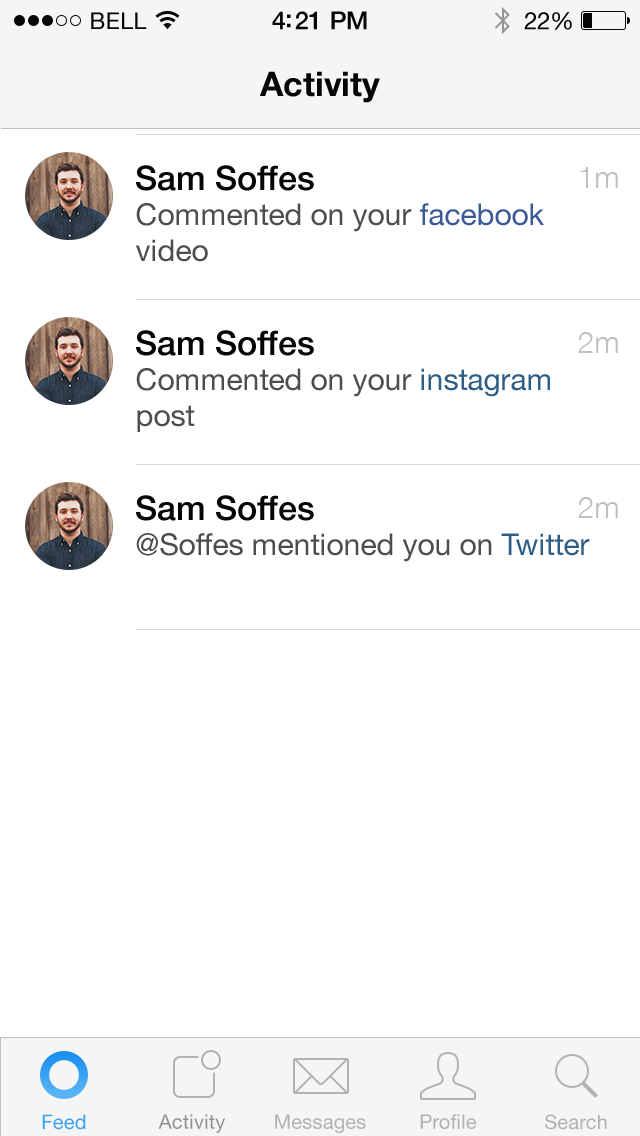
<style>
.page{position:relative;width:640px;height:1136px;background:#ffffff}
.page>*{position:absolute;margin:0}
.t1{font:23px "HelveticaNeue";letter-spacing:0.02em;color:#060606}
.t2{font:25px "HelveticaNeue-Medium";letter-spacing:-0.02em;color:#060606}
.t3{font:24px "HelveticaNeue";letter-spacing:-0.02em;color:#060606}
.t4{font:34px "HelveticaNeue-Bold";color:#060606}
.t5{font:34px "HelveticaNeue-Medium";color:#060606}
.t6{font:30px "HelveticaNeue-Light";color:#bebebe}
.t7{font:30px "HelveticaNeue";color:#4d4d4d}
.t8{font:30px "HelveticaNeue";color:#3b5998}
.t9{font:30px "HelveticaNeue";color:#2e5e86}
.t10{font:20px "HelveticaNeue";letter-spacing:0.01em;color:#3aa1f3}
.t11{font:20px "HelveticaNeue";letter-spacing:0.01em;color:#929292}
.t12{font:20px "HelveticaNeue";letter-spacing:0.01em;color:#b2b2b2}
</style>
<div class="page">
<p class="t1" style="left:91px;top:12px;width:56px;height:17px">BELL</p>
<p class="t2" style="left:272px;top:11px;width:95px;height:19px">4:21 PM</p>
<p class="t3" style="left:524px;top:12px;width:48px;height:18px">22%</p>
<p class="t4" style="left:259px;top:71px;width:121px;height:32px">Activity</p>
<p class="t5" style="left:136px;top:165px;width:178px;height:26px">Sam Soffes</p>
<p class="t6" style="left:580px;top:167px;width:38px;height:21px">1m</p>
<p class="t7" style="left:136px;top:203px;width:408px;height:59px">Commented on your <span class="t8">facebook<br></span>video</p>
<p class="t5" style="left:136px;top:330px;width:178px;height:26px">Sam Soffes</p>
<p class="t6" style="left:578px;top:332px;width:40px;height:21px">2m</p>
<p class="t7" style="left:136px;top:368px;width:414px;height:64px">Commented on your <span class="t9">instagram<br></span>post</p>
<p class="t5" style="left:136px;top:495px;width:178px;height:26px">Sam Soffes</p>
<p class="t6" style="left:578px;top:497px;width:40px;height:21px">2m</p>
<p class="t7" style="left:136px;top:533px;width:454px;height:29px">@Soffes mentioned you on <span class="t9">Twitter</span></p>
<p class="t10" style="left:42px;top:1114px;width:44px;height:16px">Feed</p>
<p class="t11" style="left:158px;top:1114px;width:67px;height:19px">Activity</p>
<p class="t12" style="left:275px;top:1114px;width:91px;height:19px">Messages</p>
<p class="t12" style="left:420px;top:1114px;width:56px;height:15px">Profile</p>
<p class="t12" style="left:545px;top:1114px;width:62px;height:16px">Search</p>
</div>
